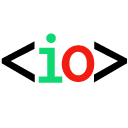
<style>
.page{position:relative;width:128px;height:128px;background:#ffffff}
.page>*{position:absolute;margin:0}
.t1{font:72px "Ricty-Bold";color:#000000}
.t2{font:72px "Ricty-Bold";color:#0ed872}
.t3{font:72px "Ricty-Bold";color:#f31c11}
</style>
<div class="page">
<p class="t1" style="left:1px;top:41px;width:34px;height:42px">&lt;</p>
<p class="t2" style="left:38px;top:33px;width:25px;height:50px">i</p>
<p class="t1" style="left:94px;top:41px;width:33px;height:42px">&gt;</p>
<p class="t3" style="left:61px;top:45px;width:34px;height:37px">o</p>
</div>
